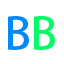
<style>
.page{position:relative;width:64px;height:64px;background:#ffffff}
.page>*{position:absolute;margin:0}
.t1{font:43.1px "AdobeHeitiStd-Regular";color:#0089fd}
.t2{font:43.1px "AdobeHeitiStd-Regular";color:#00fd65}
</style>
<div class="page">
<p class="t1" style="left:8px;top:16px;width:47px;height:34px">B<span class="t2">B</span></p>
</div>
